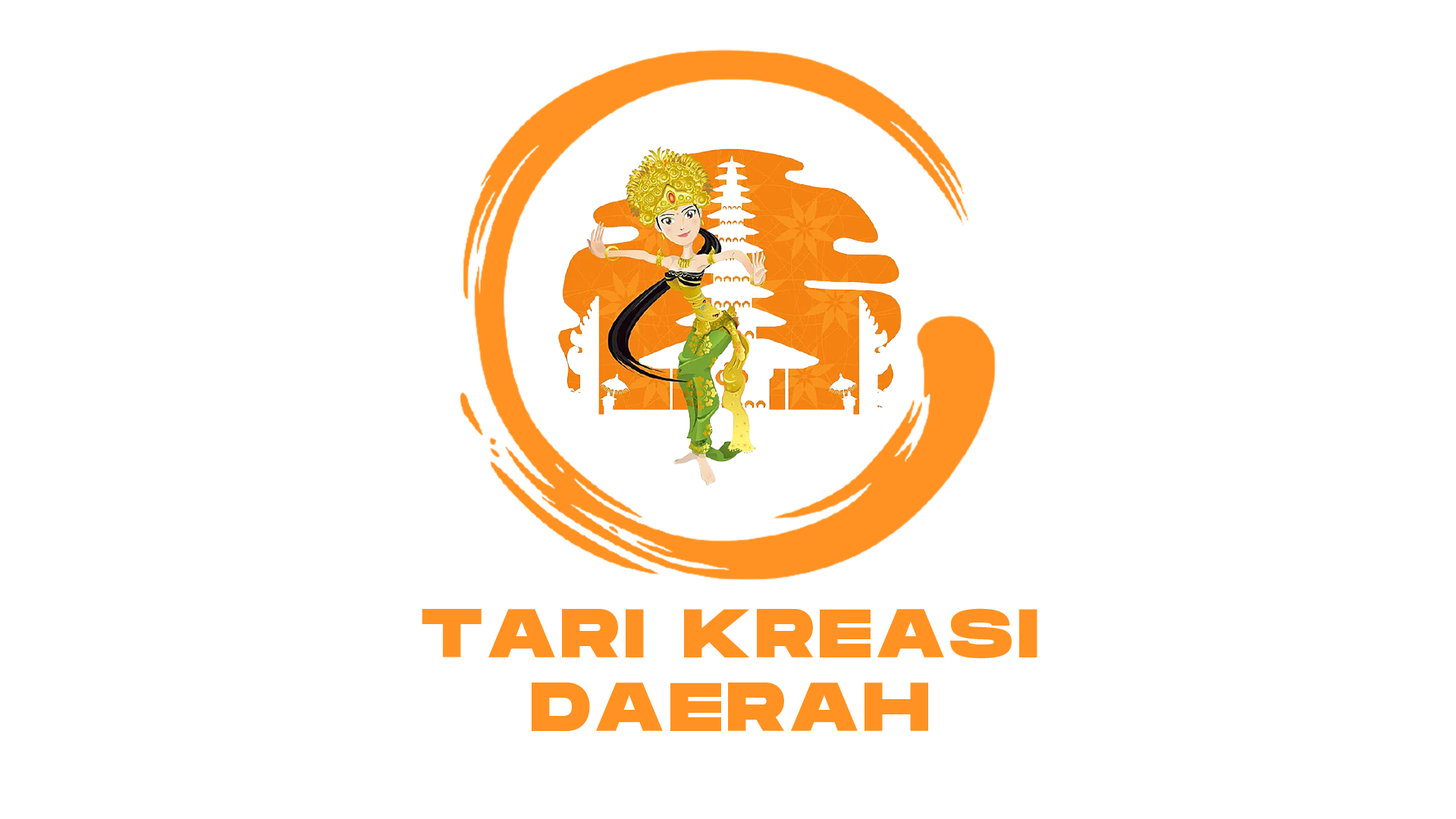
<style>
.page{position:relative;width:1456px;height:819px;background:#ffffff}
.page>*{position:absolute;margin:0}
.t1{font:68.8px/73.4px "MonumentExtended-Ultrabold";letter-spacing:0.075em;color:#ff9222;text-transform:uppercase}
</style>
<div class="page">
<p class="t1" style="left:422px;top:608px;width:615px;height:123px;text-align:center">Tari Kreasi<br>Daerah</p>
</div>
